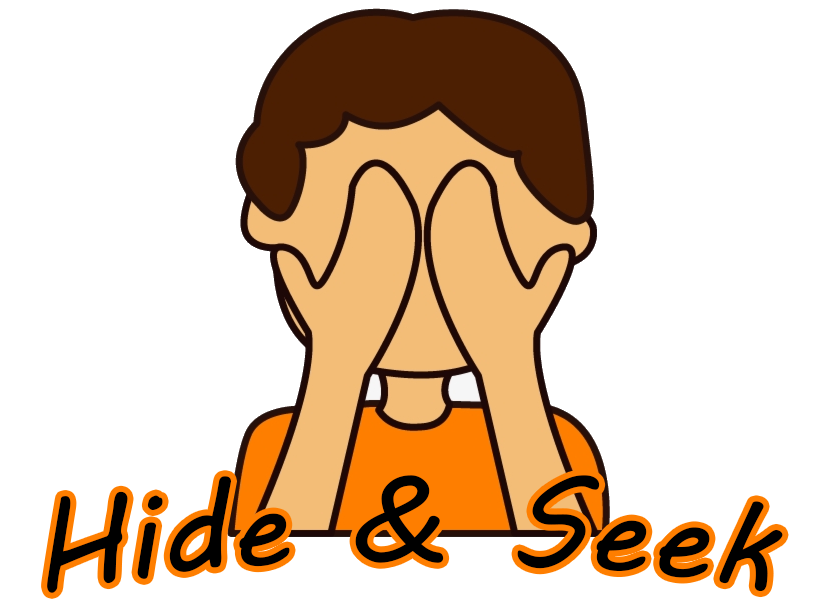
<style>
.page{position:relative;width:820px;height:609px;background:#ffffff}
.page>*{position:absolute;margin:0}
.t1{font:120px "MVBoli";letter-spacing:0.01em;color:#000000}
</style>
<div class="page">
<p class="t1" style="left:47px;top:475px;width:736px;height:118px">Hide &amp; Seek</p>
</div>
